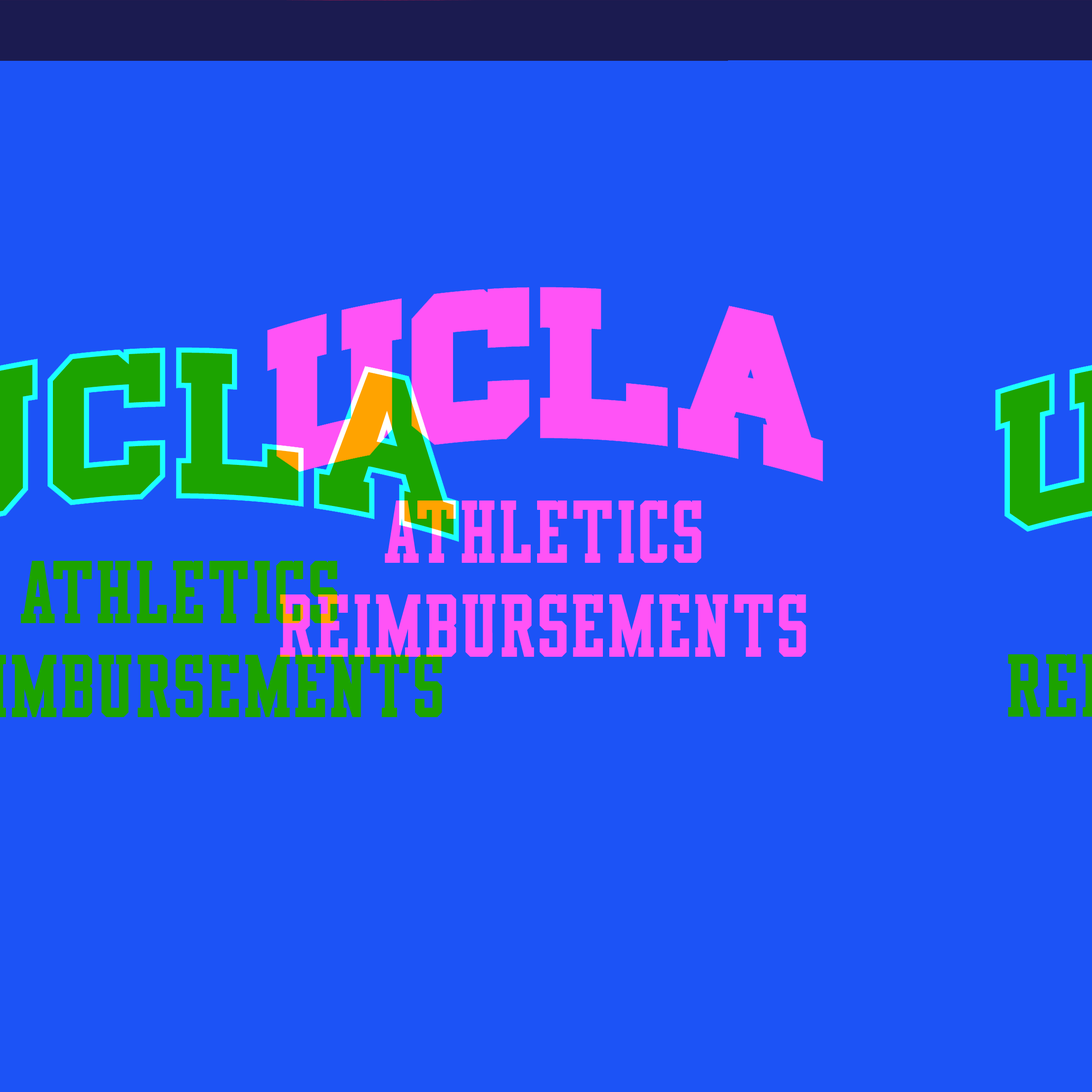
<style>
.page{position:relative;width:1092px;height:1092px;background:#1c53f6}
.page>*{position:absolute;margin:0}
.t1{font:77.2px "BruinBlock-Condensed";letter-spacing:0.025em;color:#ff53f6;font-weight:bold}
</style>
<div class="page">
<p class="t1" style="left:385px;top:500px;width:316px;height:62px">ATHLETICS</p>
<p class="t1" style="left:280px;top:594px;width:526px;height:62px">REIMBURSEMENTS</p>
</div>
